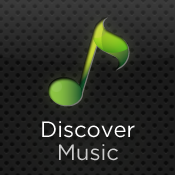
<style>
.page{position:relative;width:175px;height:175px}
.page>*{position:absolute;margin:0}
.t1{font:22px/23px "GothamHTF-Book"}
</style>
<div class="page">
<p class="t1" style="left:42px;top:121px;width:93px;height:40px;text-align:center">Discover <br>Music</p>
</div>
